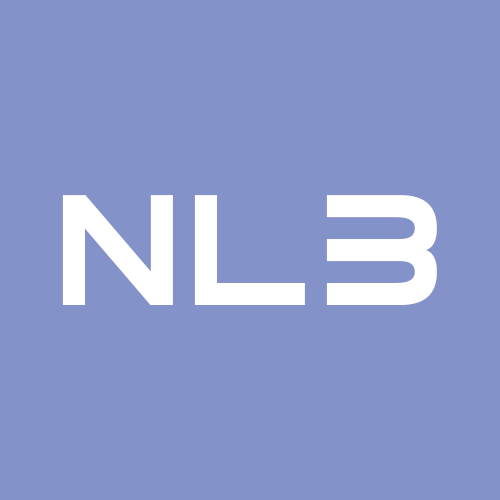
<style>
.page{position:relative;width:500px;height:500px;background:#8393ca}
.page>*{position:absolute;margin:0}
.t1{font:150px "ElementalEnd";color:#ffffff}
</style>
<div class="page">
<p class="t1" style="left:62px;top:195px;width:375px;height:110px">NLB</p>
</div>
